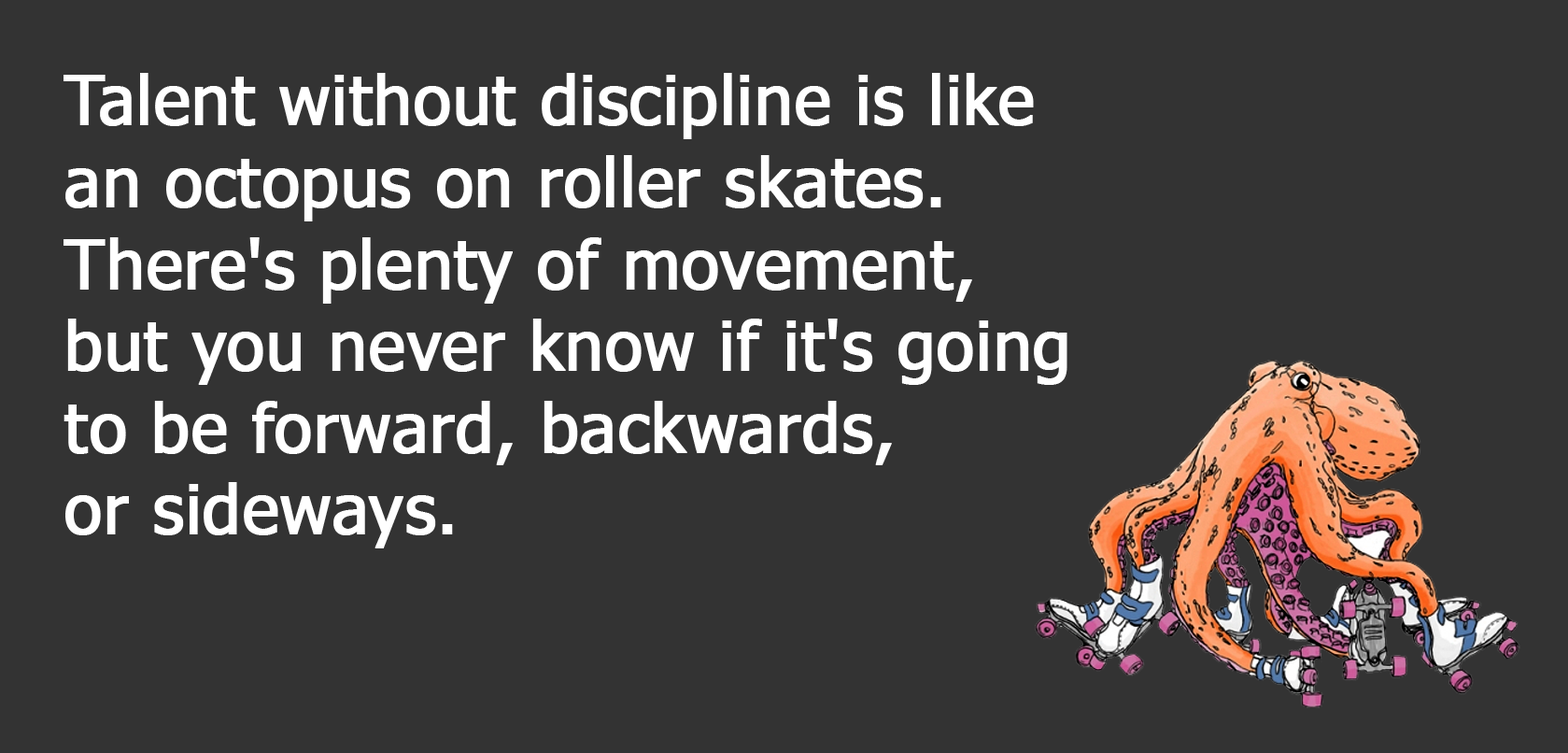
<style>
.page{position:relative;width:1568px;height:753px;background:#333333}
.page>*{position:absolute;margin:0}
.t1{font:68.2px "Tahoma";color:#ffffff;font-weight:bold}
</style>
<div class="page">
<p class="t1" style="left:64px;top:73px;width:1003px;height:475px">Talent without discipline is like an octopus on roller skates. <br>There's plenty of movement, but you never know if it's going to be forward, backwards, <br>or sideways.</p>
</div>
